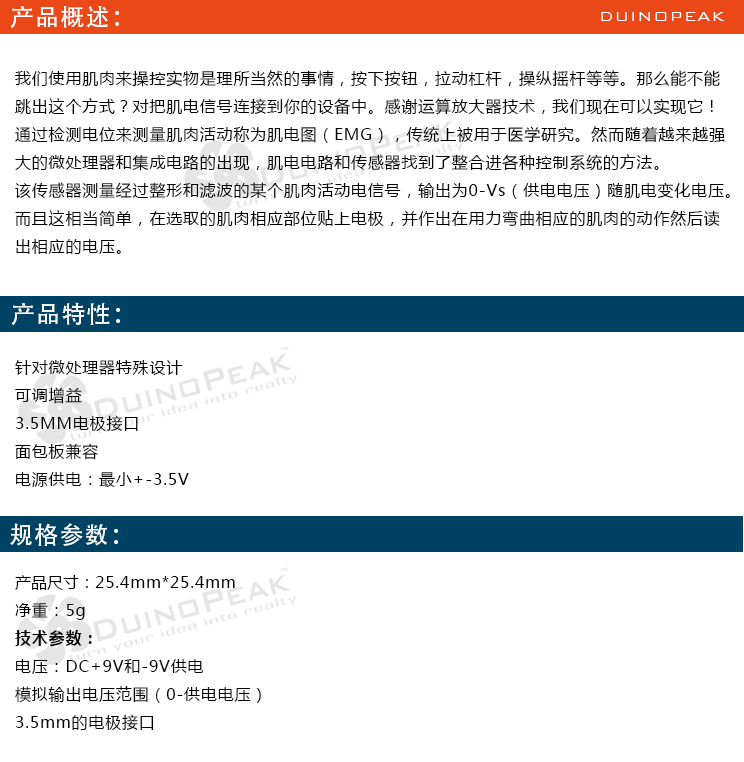
<style>
.page{position:relative;width:744px;height:762px;background:#ffffff}
.page>*{position:absolute;margin:0}
.t1{font:24px "AdobeHeitiStd-Regular";letter-spacing:0.05em;color:#ffffff}
.t2{font:18px "BankGothicBT-Light";letter-spacing:0.05em;color:#ffffff}
.t3{font:16px "MicrosoftYaHei";letter-spacing:0.05em;color:#000000}
.t4{font:16px "MicrosoftYaHei";color:#000000}
.t5{font:16px "MicrosoftYaHei-Bold";letter-spacing:0.05em;color:#000000}
</style>
<div class="page">
<p class="t1" style="left:10px;top:6px;width:109px;height:23px">产品概述：</p>
<p class="t2" style="left:601px;top:12px;width:124px;height:9px">DUINOPEAK</p>
<p class="t3" style="left:15px;top:70px;width:715px;height:184px">我们使用肌肉来操控实物是理所当然的事情，按下按钮，拉动杠杆，操纵摇杆等等。那么能不能<br>跳出这个方式？对把肌电信号连接到你的设备中。感谢运算放大器技术，我们现在可以实现它！<br>通过检测电位来测量肌肉活动称为肌电图（EMG），传统上被用于医学研究。然而随着越来越强<br>大的微处理器和集成电路的出现，肌电电路和传感器找到了整合进各种控制系统的方法。<br>该传感器测量经过整形和滤波的某个肌肉活动电信号，输出为0-Vs（供电电压）随肌电变化电压。<br>而且这相当简单，在选取的肌肉相应部位贴上电极，并作出在用力弯曲相应的肌肉的动作然后读<br>出相应的电压。</p>
<p class="t1" style="left:11px;top:302px;width:109px;height:24px">产品特性：</p>
<p class="t3" style="left:15px;top:360px;width:174px;height:128px">针对微处理器特殊设计<br>可调增益<br>3.5MM电极接口<br>面包板兼容<br>电源供电：最小+-3.5V</p>
<p class="t1" style="left:10px;top:523px;width:108px;height:23px">规格参数：</p>
<p class="t3" style="left:15px;top:575px;width:246px;height:155px"><span class="t4">产品尺寸：</span>25.4mm*25.4mm<br>净重：5g<br><span class="t5">技术参数：<br></span>电压：DC+9V和-9V供电<br>模拟输出电压范围（0-供电电压）<br>3.5mm的电极接口</p>
</div>
